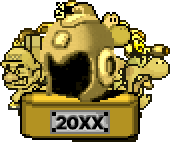
<style>
.page{position:relative;width:170px;height:142px;background:#ffffff}
.page>*{position:absolute;margin:0}
.t1{font:18px "InterTight-Black";letter-spacing:-0.04em;color:#000000}
</style>
<div class="page">
<p class="t1" style="left:56px;top:116px;width:48px;height:14px">20XX</p>
</div>
